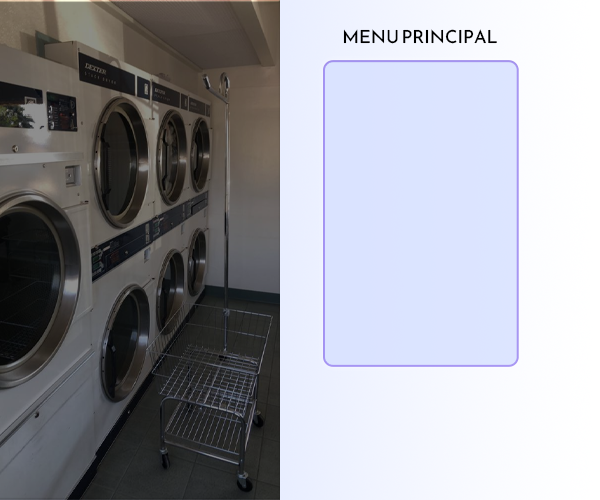
<style>
.page{position:relative;width:600px;height:500px}
.page>*{position:absolute;margin:0}
.t1{font:18px "ReemKufi-Regular";color:#000000;text-transform:uppercase}
</style>
<div class="page">
<p class="t1" style="left:343px;top:29px;width:154px;height:15px">menu principal</p>
</div>
